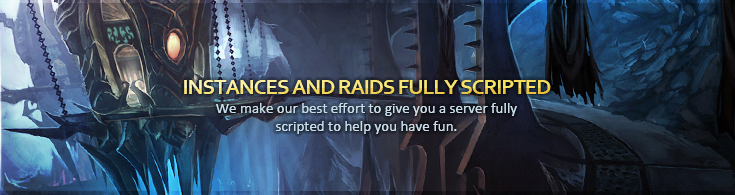
<style>
.page{position:relative;width:735px;height:195px}
.page>*{position:absolute;margin:0}
.t1{font:22px "Corbel-Bold";letter-spacing:-0.05em;text-transform:uppercase}
.t2{font:15px "Calibri";color:#c8deeb}
</style>
<div class="page">
<p class="t1" style="left:184px;top:80px;width:367px;height:14px">Instances and raids fully scripted</p>
<p class="t1" style="left:184px;top:80px;width:367px;height:14px">Instances and raids fully scripted</p>
<p class="t2" style="left:216px;top:103px;width:301px;height:31px;text-align:center">We make our best effort to give you a server fully scripted to help you have fun.</p>
<p class="t2" style="left:216px;top:103px;width:301px;height:31px;text-align:center">We make our best effort to give you a server fully scripted to help you have fun.</p>
</div>
